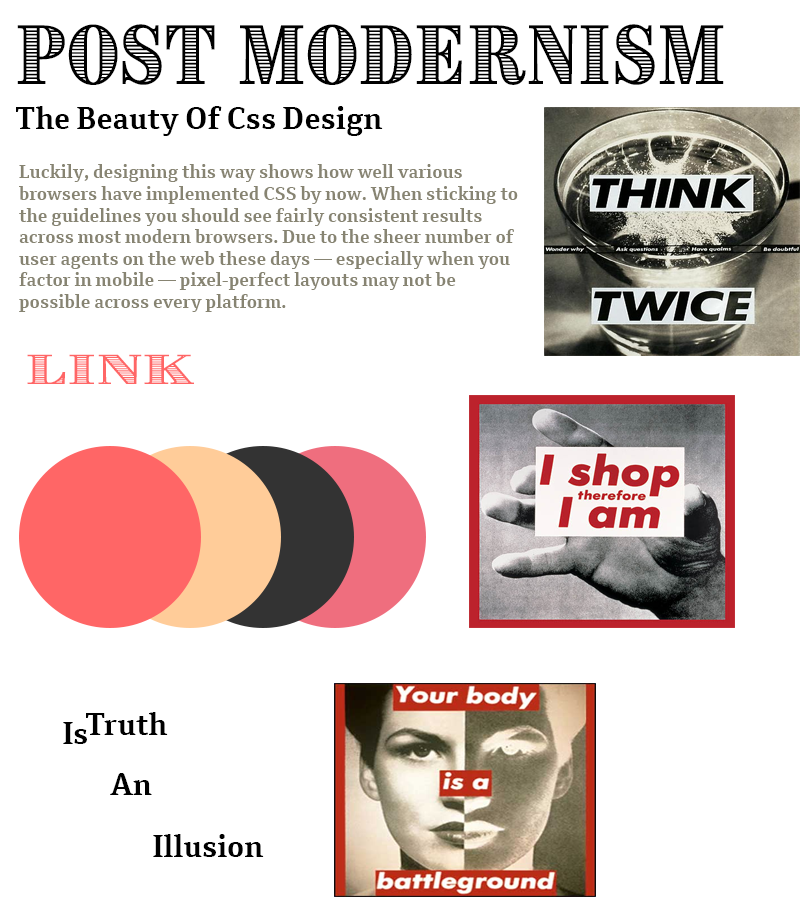
<style>
.page{position:relative;width:800px;height:900px;background:#ffffff}
.page>*{position:absolute;margin:0}
.t1{font:72px "BrimNarrow-Combined1";color:#000000}
.t2{font:30px "Cordale-Bold";color:#000000}
.t3{font:18px "Cordale-Bold";color:#878472}
.t4{font:36px "BrimNarrow-Combined1";color:#ff6666;scale:1.77 1}
</style>
<div class="page">
<p class="t1" style="left:17px;top:24px;width:707px;height:61px">Post Modernism</p>
<p class="t2" style="left:16px;top:106px;width:367px;height:30px">The Beauty Of Css Design</p>
<p class="t3" style="left:19px;top:164px;width:499px;height:148px">Luckily, designing this way shows how well various browsers have implemented CSS by now. When sticking to the guidelines you should see fairly consistent results across most modern browsers. Due to the sheer number of user agents on the web these days — especially when you factor in mobile — pixel-perfect layouts may not be possible across every platform.</p>
<p class="t4" style="left:27px;top:354px;width:167px;height:30px">Link</p>
<p class="t2" style="left:86px;top:712px;width:82px;height:23px">Truth</p>
<p class="t2" style="left:63px;top:722px;width:24px;height:22px">Is</p>
<p class="t2" style="left:110px;top:773px;width:42px;height:22px">An</p>
<p class="t2" style="left:153px;top:834px;width:111px;height:23px">Illusion</p>
</div>
